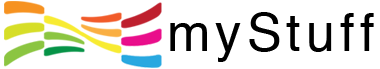
<style>
.page{position:relative;width:380px;height:69px;background:#ffffff}
.page>*{position:absolute;margin:0}
.t1{font:52px "Helvetica";letter-spacing:0.1em;color:#000000}
</style>
<div class="page">
<p class="t1" style="left:170px;top:12px;width:204px;height:50px">myStuff</p>
</div>
